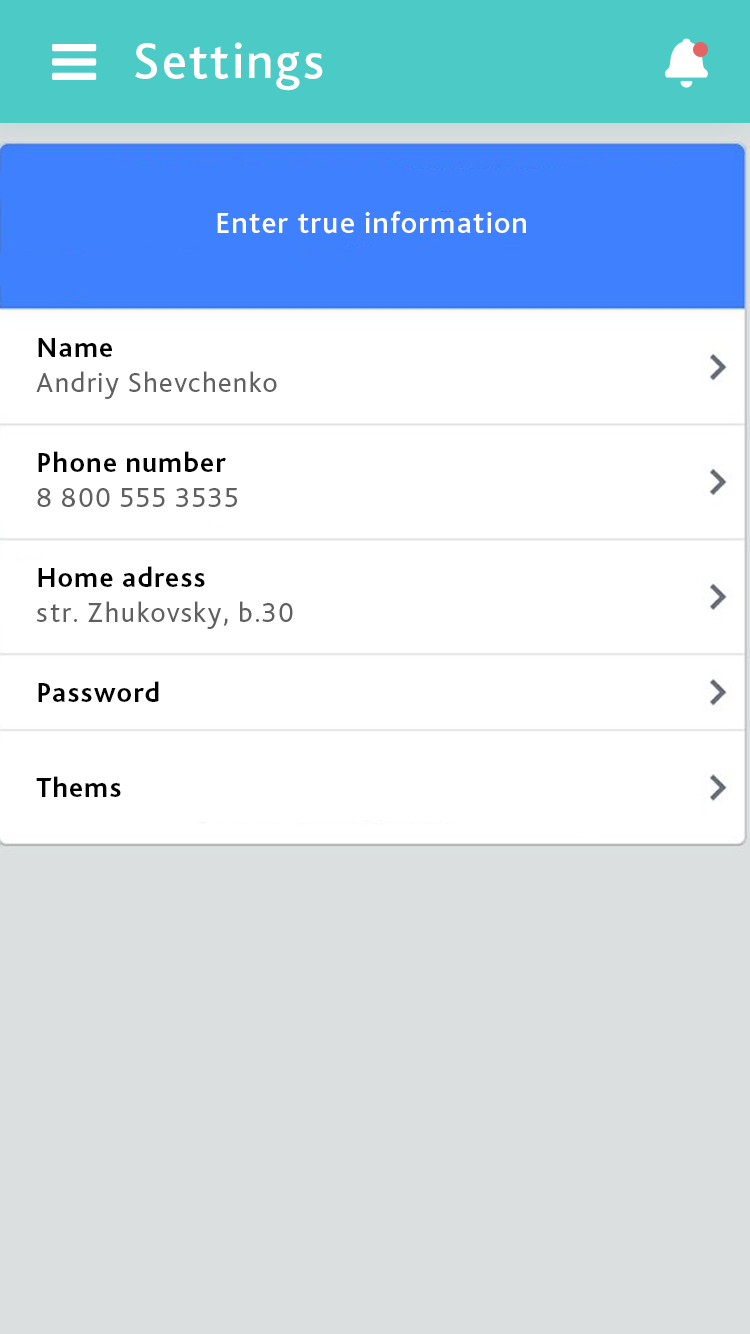
<style>
.page{position:relative;width:750px;height:1334px;background:#dbdfe0}
.page>*{position:absolute;margin:0}
.t1{font:51.7px "BlissPro-Medium";letter-spacing:0.04em;color:#ffffff}
.t2{font:30.8px "BlissPro-Medium";letter-spacing:0.04em;color:#ffffff}
.t3{font:28.7px "BlissPro";letter-spacing:0.04em;color:#606060}
.t4{font:28.7px "BlissPro-Bold";letter-spacing:0.04em;color:#000000}
</style>
<div class="page">
<p class="t1" style="left:135px;top:42px;width:188px;height:49px">Settings</p>
<p class="t2" style="left:217px;top:211px;width:309px;height:23px">Enter true information</p>
<p class="t3" style="left:36px;top:338px;width:241px;height:61px"><span class="t4">Name<br></span>Andriy Shevchenko</p>
<p class="t3" style="left:37px;top:451px;width:200px;height:56px"><span class="t4">Phone number<br></span>8 800 555 3535</p>
<p class="t3" style="left:36px;top:566px;width:257px;height:63px"><span class="t4">Home adress<br></span>str. Zhukovsky, b.30</p>
<p class="t4" style="left:38px;top:681px;width:121px;height:21px">Password</p>
<p class="t4" style="left:36px;top:776px;width:85px;height:21px">Thems</p>
</div>
